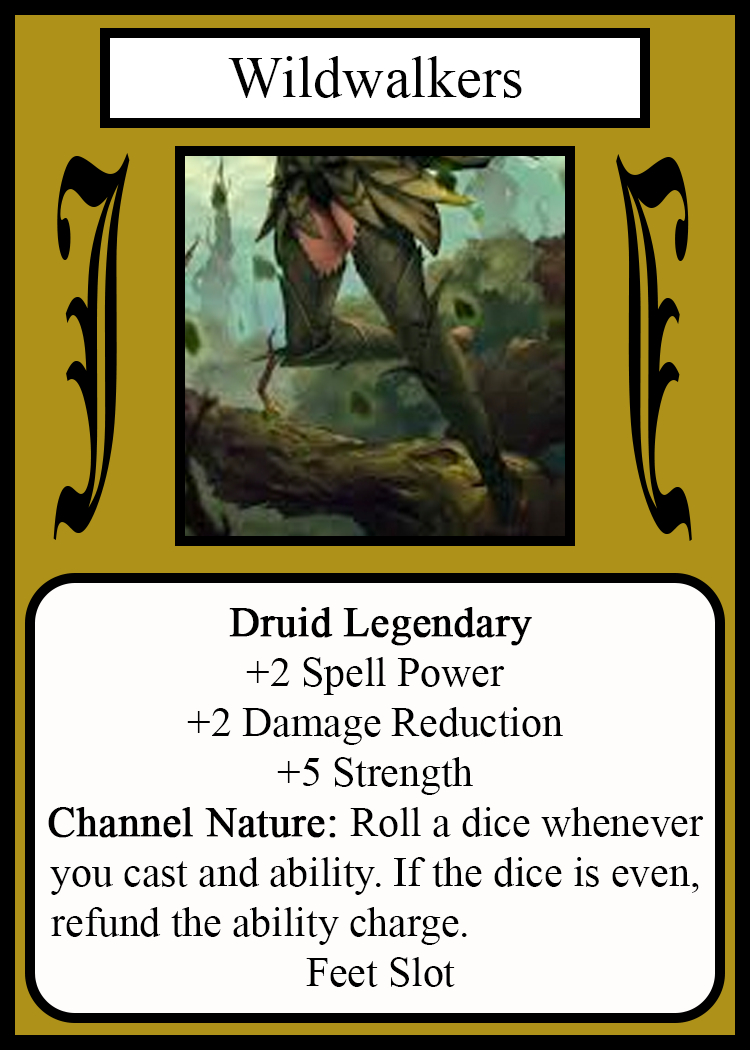
<style>
.page{position:relative;width:750px;height:1050px;background:#fffcfc}
.page>*{position:absolute;margin:0}
.t1{font:58.3px "TimesNewRomanPSMT";color:#010101}
.t2{font:450.1px "OldEnglishTextMT";color:#000000;scale:0.26 1}
.t3{font:449.7px "OldEnglishTextMT";color:#000000;scale:0.26 1}
.t4{font:41.7px "TimesNewRomanPSMT";color:#000000}
.t5{font:41.7px "TimesNewRomanPSMT";color:#000000;font-weight:bold}
</style>
<div class="page">
<p class="t1" style="left:228px;top:56px;width:294px;height:42px">Wildwalkers</p>
<p class="t2" style="left:53px;top:153px;width:77px;height:387px">J</p>
<p class="t3" style="left:616px;top:154px;width:76px;height:387px;rotate:180deg">J</p>
<p class="t4" style="left:48px;top:607px;width:656px;height:380px;text-align:center"><span class="t5">Druid Legendary</span><br>+2 Spell Power<br>+2 Damage Reduction<br>+5 Strength<br><span class="t5">Channel Nature: </span>Roll a dice whenever<br>you cast and ability. If the dice is even,<br>refund the ability charge.                      <br> Feet Slot</p>
</div>
